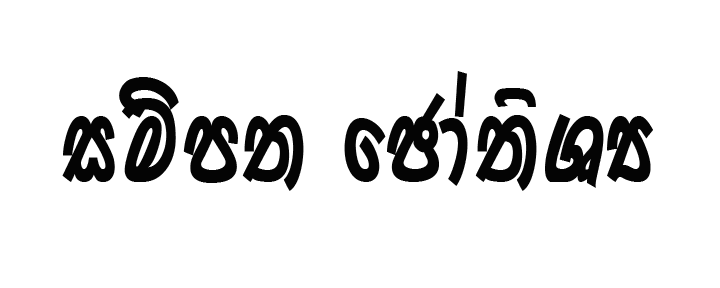
<style>
.page{position:relative;width:720px;height:288px;background:#ffffff}
.page>*{position:absolute;margin:0}
.t1{font:111.4px "0KDBOLIDDAbold";letter-spacing:0.04em;color:#040404;scale:0.76 1}
</style>
<div class="page">
<p class="t1" style="left:62px;top:71px;width:591px;height:120px">iïm; fPda;zYH</p>
</div>
